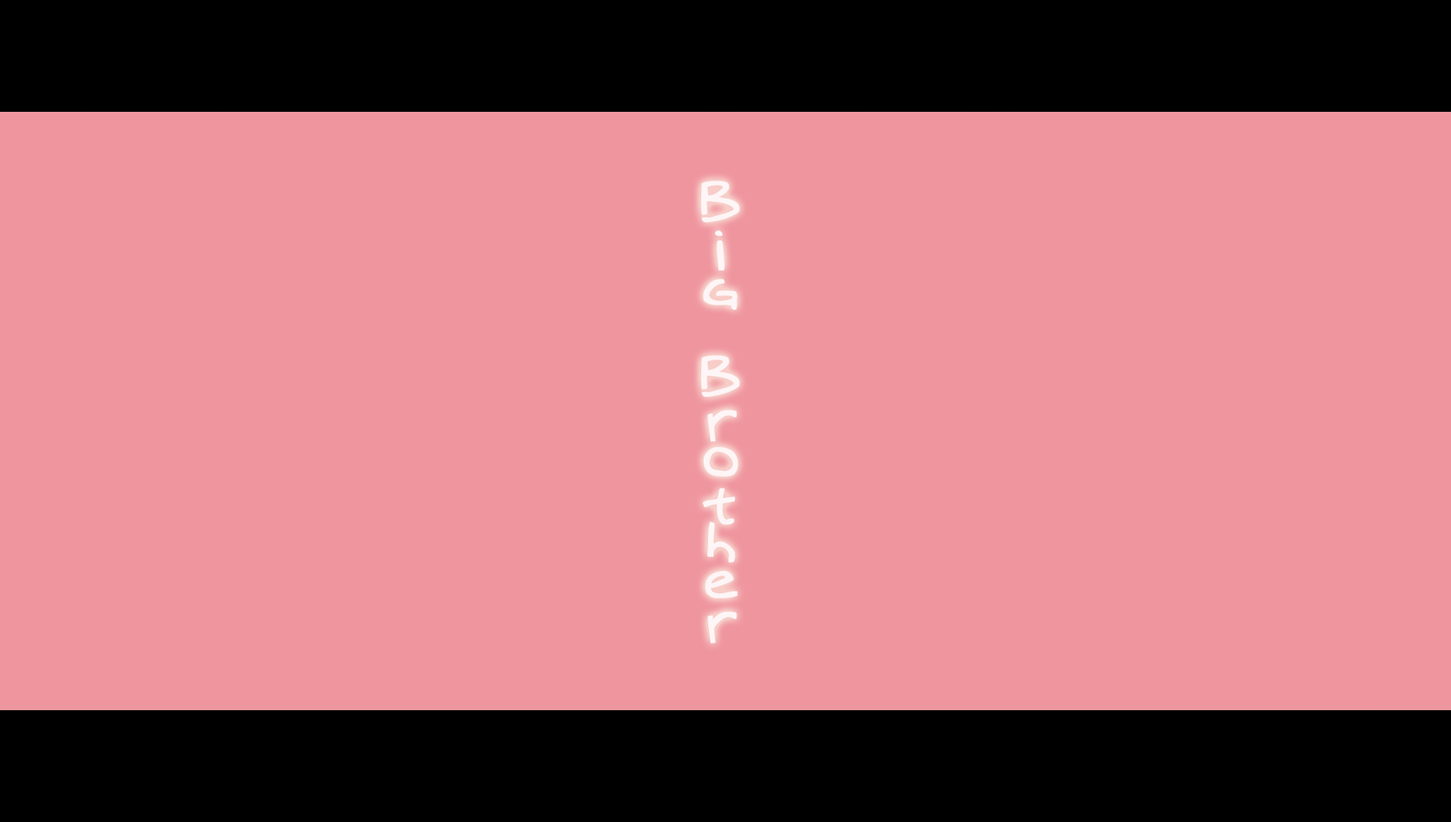
<style>
.page{position:relative;width:1451px;height:822px;background:#ef959e}
.page>*{position:absolute;margin:0}
.t1{font:53px/232.7px "Augie";letter-spacing:-0.2em;color:#ffffff;font-weight:bold}
.t2{font:53px/232.7px "Augie";letter-spacing:-0.1em;color:#ffffff;font-weight:bold}
.t3{font:53px/232.7px "Augie";letter-spacing:-0.3em;color:#ffffff;font-weight:bold}
</style>
<div class="page">
<p class="t1" style="left:700px;top:181px;width:40px;height:463px;opacity:0.89"><span class="t2">B</span><span class="t3">i</span>g   B<span class="t3">r</span><span class="t2">o</span><span class="t3">th</span>er</p>
</div>
